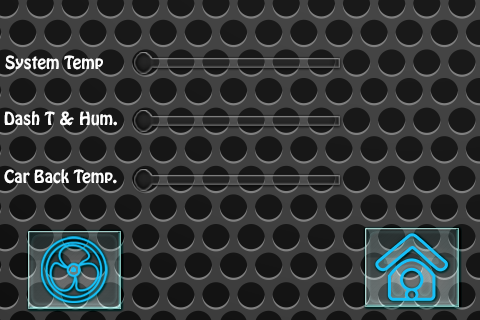
<style>
.page{position:relative;width:480px;height:320px}
.page>*{position:absolute;margin:0}
.t1{font:16px "HoboStd";color:#fdfdfd}
</style>
<div class="page">
<p class="t1" style="left:5px;top:55px;width:98px;height:15px">System Temp</p>
<p class="t1" style="left:4px;top:111px;width:113px;height:15px">Dash T &amp; Hum.</p>
<p class="t1" style="left:4px;top:169px;width:113px;height:15px">Car Back Temp.</p>
</div>
